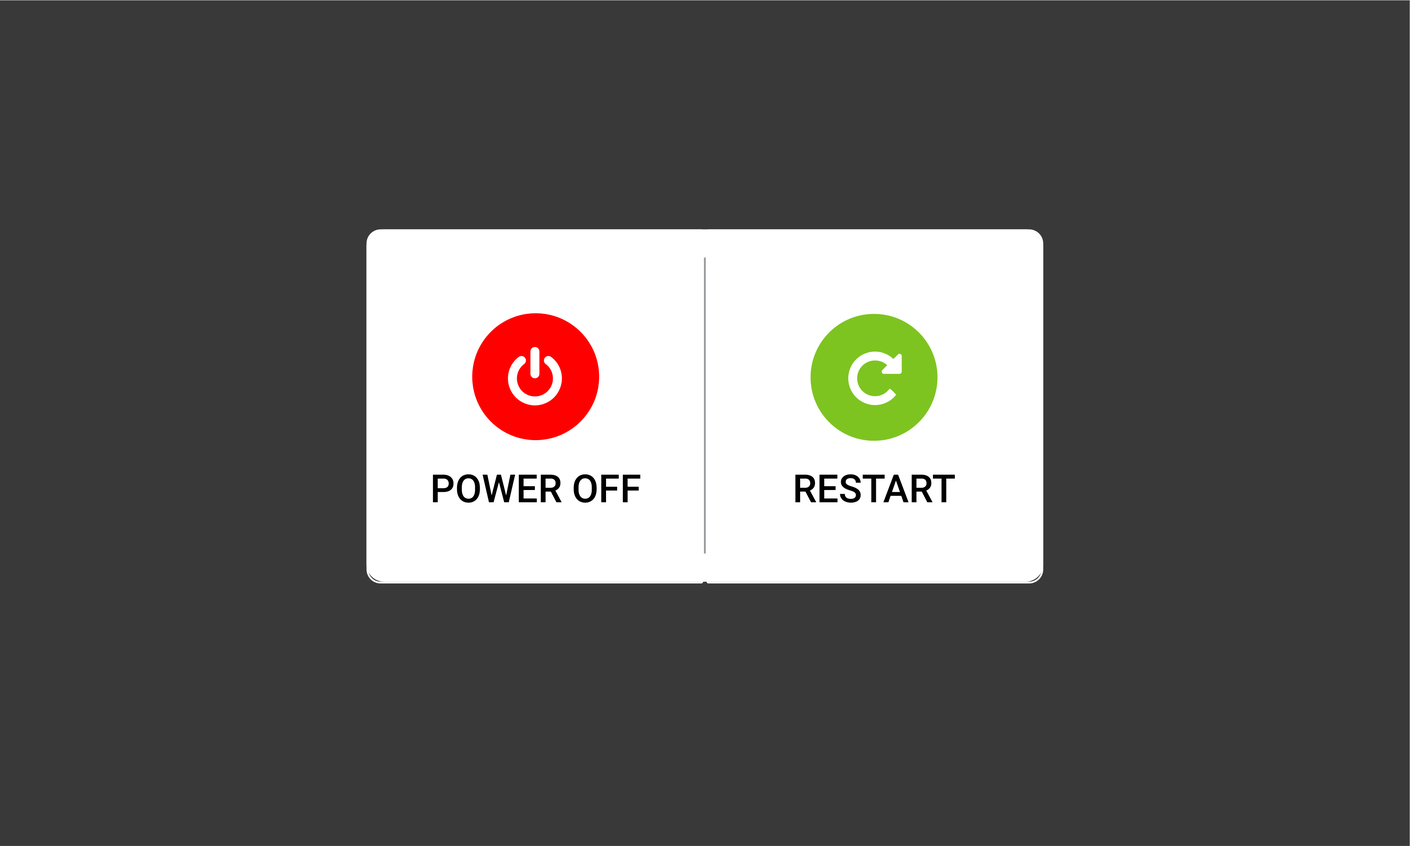
<style>
.page{position:relative;width:1410px;height:846px;background:#393939}
.page>*{position:absolute;margin:0}
.t1{font:38.8px "Roboto-Medium";color:#000000}
</style>
<div class="page">
<p class="t1" style="left:433px;top:474px;width:207px;height:29px">POWER OFF</p>
<p class="t1" style="left:795px;top:474px;width:160px;height:29px">RESTART</p>
</div>
